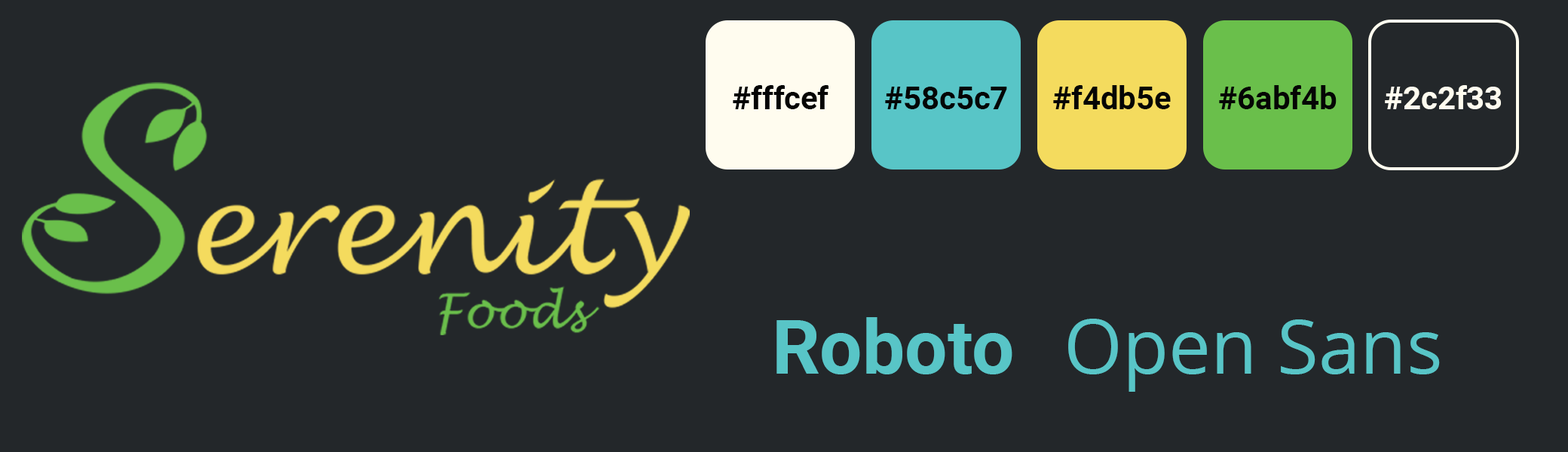
<style>
.page{position:relative;width:1568px;height:452px;background:#23272a}
.page>*{position:absolute;margin:0}
.t1{font:31.4px "Roboto-Bold";color:#050505}
.t2{font:31.4px "Roboto-Bold";color:#fffcef}
.t3{font:75.4px "Roboto-Bold";color:#58c5c7}
.t4{font:75.4px "OpenSans-Regular";color:#58c5c7}
</style>
<div class="page">
<p class="t1" style="left:733px;top:85px;width:95px;height:24px">fffcef#</p>
<p class="t1" style="left:885px;top:87px;width:122px;height:22px">58c5c7#</p>
<p class="t1" style="left:1053px;top:85px;width:118px;height:24px">f4db5e#</p>
<p class="t1" style="left:1219px;top:85px;width:118px;height:24px">6abf4b#</p>
<p class="t2" style="left:1385px;top:85px;width:116px;height:24px">2c2f33#</p>
<p class="t3" style="left:776px;top:317px;width:236px;height:58px">Roboto</p>
<p class="t4" style="left:1068px;top:319px;width:372px;height:73px">Open Sans</p>
</div>
